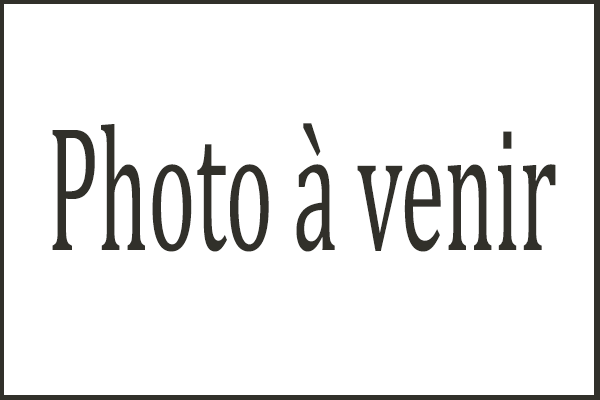
<style>
.page{position:relative;width:600px;height:400px;background:#ffffff}
.page>*{position:absolute;margin:0}
.t1{font:180px "CambriaMath";color:#31302a;scale:0.5 1}
</style>
<div class="page">
<p class="t1" style="left:52px;top:123px;width:504px;height:129px">Photo à venir</p>
</div>
